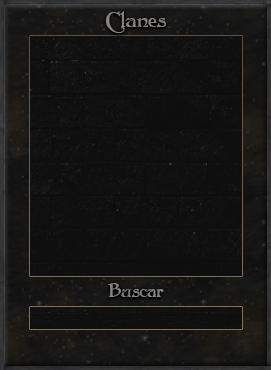
<style>
.page{position:relative;width:271px;height:370px}
.page>*{position:absolute;margin:0}
.t1{font:20.8px "Folkard";color:#88837e}
.t2{font:17.7px "Folkard";color:#88837e}
</style>
<div class="page">
<p class="t1" style="left:105px;top:11px;width:61px;height:22px">Clanes</p>
<p class="t2" style="left:108px;top:283px;width:56px;height:14px">Buscar</p>
</div>
